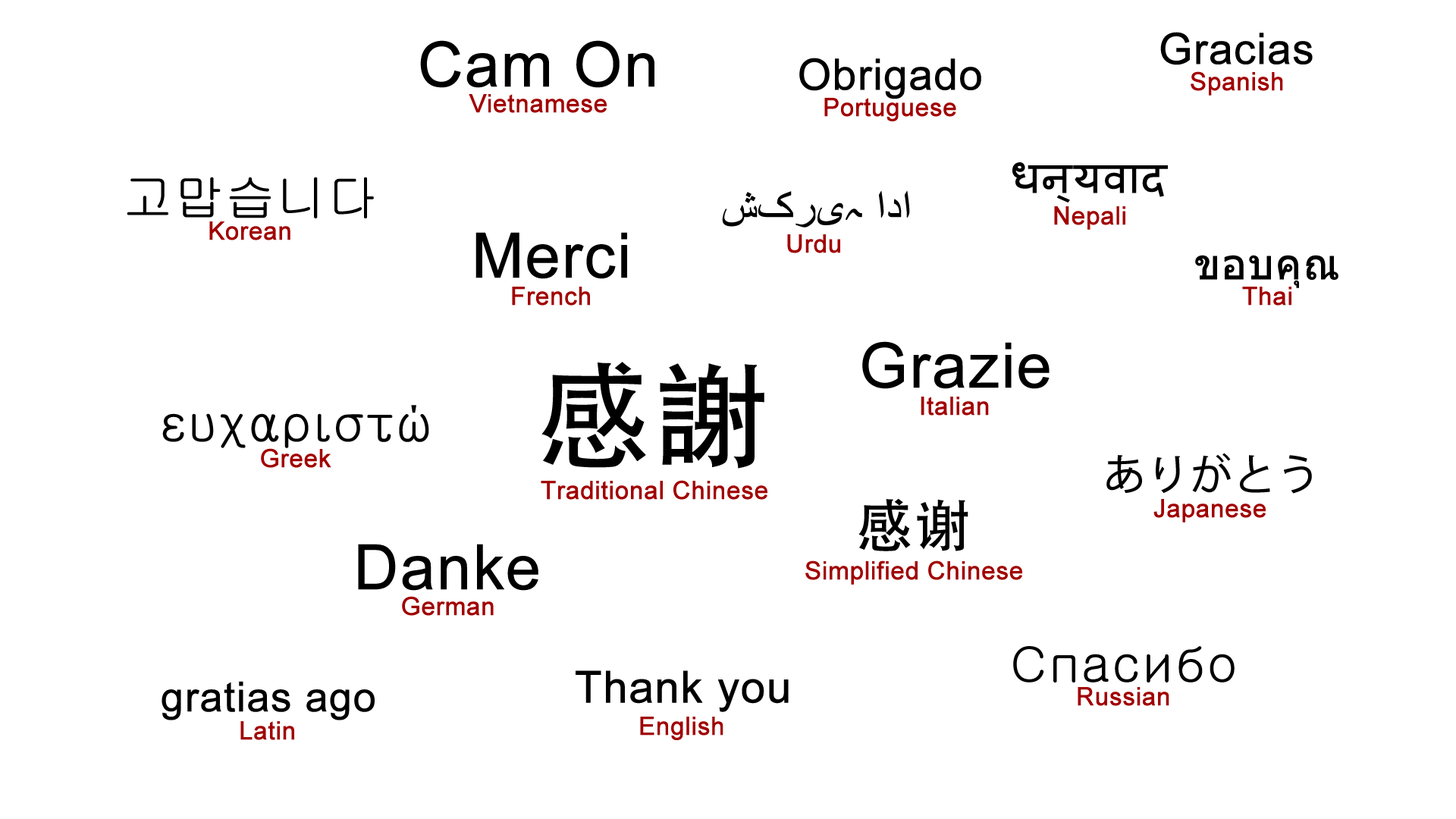
<style>
.page{position:relative;width:1456px;height:819px;background:#ffffff}
.page>*{position:absolute;margin:0}
.t1{font:62.4px "ArialMT";color:#000000;font-weight:bold}
.t2{font:43px "ArialMT";color:#000000;font-weight:bold}
.t3{font:25px "ArialMT";color:#a10000;font-weight:bold}
.t4{font:42.3px "Mangal";color:#000000;font-weight:bold}
.t5{font:49.9px "Gulim";color:#000000;font-weight:bold}
.t6{font:43.2px "ArialMT";color:#000000;font-weight:bold}
.t7{font:42.3px "Tahoma";color:#000000;font-weight:bold}
.t8{font:114.6px "AdobeHeitiStd-Regular";color:#000000;font-weight:bold}
.t9{font:49.5px "Gulim";color:#000000;font-weight:bold}
.t10{font:42.3px "KozGoPr6N-Regular";color:#000000;font-weight:bold}
.t11{font:56.5px "AdobeHeitiStd-Regular";color:#000000;font-weight:bold}
.t12{font:44.3px "ArialMT";color:#000000;font-weight:bold}
.t13{font:41.3px "ArialMT";color:#000000;font-weight:bold}
</style>
<div class="page">
<p class="t1" style="left:420px;top:40px;width:234px;height:48px">Cam On</p>
<p class="t2" style="left:1160px;top:32px;width:153px;height:33px">Gracias</p>
<p class="t2" style="left:799px;top:58px;width:182px;height:41px">Obrigado</p>
<p class="t3" style="left:1191px;top:71px;width:92px;height:25px">Spanish</p>
<p class="t3" style="left:469px;top:94px;width:138px;height:19px">Vietnamese</p>
<p class="t3" style="left:824px;top:98px;width:132px;height:23px">Portuguese</p>
<p class="t4" style="left:1012px;top:162px;width:156px;height:40px">धन्यवाद</p>
<p class="t5" style="left:127px;top:177px;width:247px;height:41px">고맙습니다</p>
<p class="t6" style="left:722px;top:190px;width:188px;height:37px">شکریہ ادا</p>
<p class="t3" style="left:1054px;top:206px;width:71px;height:24px">Nepali</p>
<p class="t3" style="left:209px;top:221px;width:81px;height:19px">Korean</p>
<p class="t1" style="left:475px;top:232px;width:152px;height:47px">Merci</p>
<p class="t3" style="left:787px;top:234px;width:53px;height:19px">Urdu</p>
<p class="t7" style="left:1195px;top:255px;width:143px;height:33px">ขอบคุณ</p>
<p class="t3" style="left:512px;top:287px;width:78px;height:19px">French</p>
<p class="t3" style="left:1242px;top:287px;width:49px;height:19px">Thai</p>
<p class="t1" style="left:862px;top:341px;width:188px;height:48px">Grazie</p>
<p class="t8" style="left:541px;top:362px;width:223px;height:107px">感謝</p>
<p class="t3" style="left:921px;top:397px;width:68px;height:19px">Italian</p>
<p class="t9" style="left:162px;top:405px;width:267px;height:43px">ευχαριστώ</p>
<p class="t3" style="left:261px;top:448px;width:70px;height:20px">Greek</p>
<p class="t10" style="left:1106px;top:453px;width:206px;height:41px">ありがとう</p>
<p class="t3" style="left:541px;top:480px;width:226px;height:20px">Traditional Chinese</p>
<p class="t11" style="left:858px;top:498px;width:110px;height:53px">感谢</p>
<p class="t3" style="left:1153px;top:499px;width:113px;height:23px">Japanese</p>
<p class="t1" style="left:358px;top:544px;width:180px;height:47px">Danke</p>
<p class="t3" style="left:805px;top:560px;width:217px;height:25px">Simplified Chinese</p>
<p class="t3" style="left:402px;top:596px;width:92px;height:20px">German</p>
<p class="t5" style="left:1013px;top:646px;width:222px;height:36px">Спасибо</p>
<p class="t12" style="left:576px;top:670px;width:213px;height:42px">Thank you</p>
<p class="t13" style="left:162px;top:681px;width:213px;height:39px">gratias ago</p>
<p class="t3" style="left:1078px;top:687px;width:91px;height:19px">Russian</p>
<p class="t3" style="left:240px;top:721px;width:54px;height:19px">Latin</p>
<p class="t3" style="left:640px;top:717px;width:83px;height:23px">English</p>
</div>
